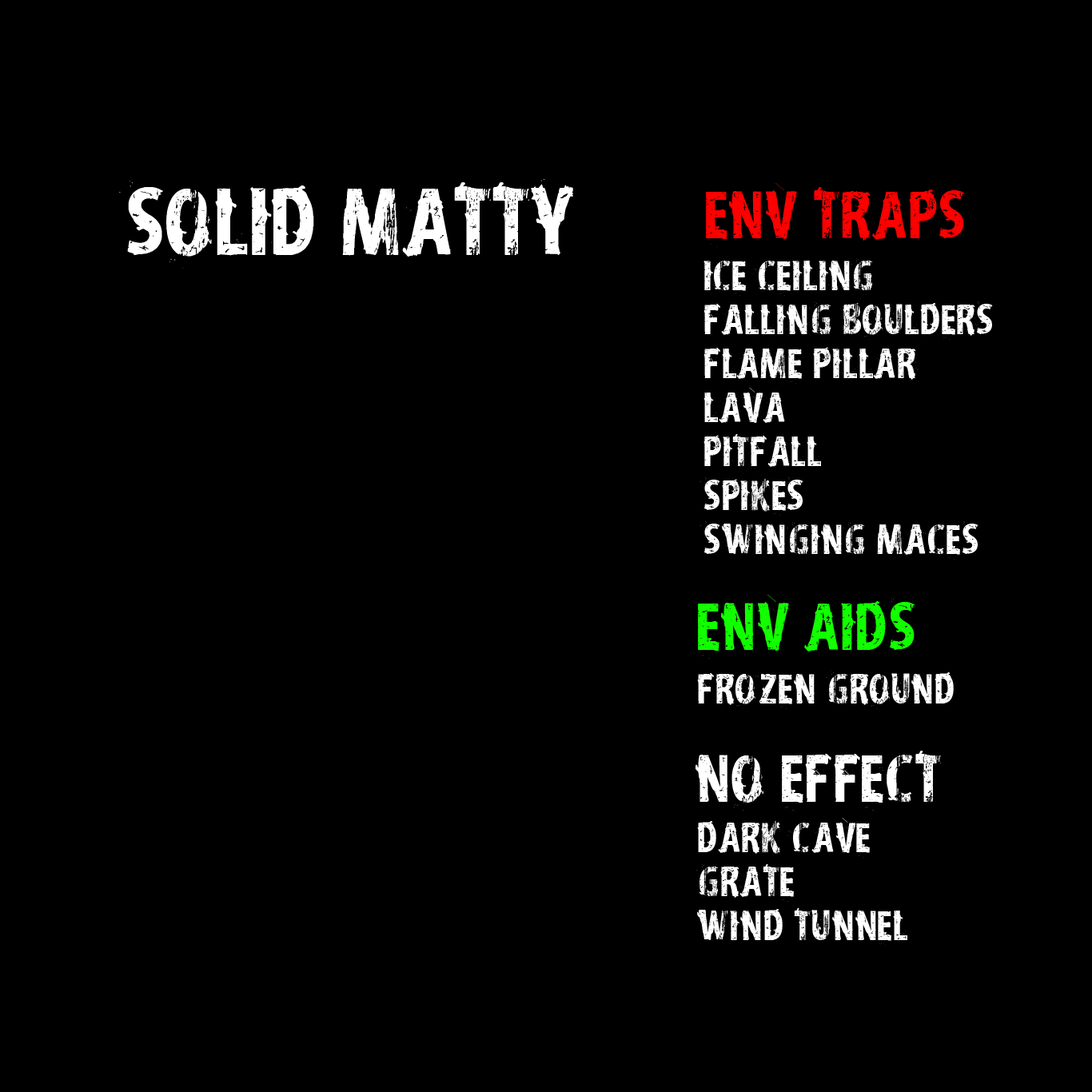
<style>
.page{position:relative;width:1092px;height:1092px;background:#000000}
.page>*{position:absolute;margin:0}
.t1{font:83.5px "vtksdistress";color:#ffffff}
.t2{font:58.4px "vtksdistress";color:#ff0000}
.t3{font:37.2px/44px "vtksdistress";color:#ffffff}
.t4{font:58.4px "vtksdistress";color:#12ff00}
.t5{font:37.2px "vtksdistress";color:#ffffff}
.t6{font:58.4px "vtksdistress";color:#ffffff}
</style>
<div class="page">
<p class="t1" style="left:119px;top:179px;width:454px;height:90px">SOLID matty</p>
<p class="t2" style="left:706px;top:183px;width:259px;height:64px">Env traps</p>
<p class="t3" style="left:700px;top:258px;width:293px;height:302px">Ice Ceiling<br>falling boulders<br>flame pillar<br>Lava<br>pitfall<br>spikes<br>swinging maces</p>
<p class="t4" style="left:698px;top:595px;width:217px;height:64px">ENV AIDs</p>
<p class="t5" style="left:697px;top:671px;width:257px;height:38px">Frozen ground</p>
<p class="t6" style="left:695px;top:751px;width:246px;height:60px">No effect</p>
<p class="t3" style="left:696px;top:818px;width:211px;height:128px">dark cave<br>grate<br>Wind tunnel</p>
</div>
